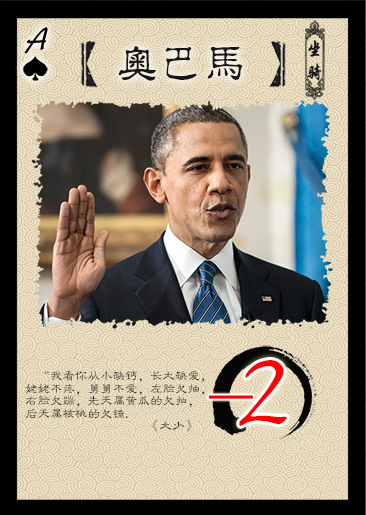
<style>
.page{position:relative;width:366px;height:515px}
.page>*{position:absolute;margin:0}
.t1{font:39.2px "Jxixinkai";letter-spacing:0.22em;color:#000000;font-weight:bold;font-style:italic}
.t2{font:41.7px "¾­µä·±½ÇÁ¥ Regular";letter-spacing:0.05em;color:#161616}
.t3{font:125.1px "Jxixinkai";letter-spacing:-0.1em;color:#fa0303}
.t4{font:12.5px/12.5px "FZLBJW--GB1-0";color:#171717}
</style>
<div class="page">
<p class="t1" style="left:24px;top:27px;width:24px;height:27px">A</p>
<p class="t2" style="left:118px;top:46px;width:125px;height:35px">奥巴马</p>
<p class="t3" style="left:239px;top:360px;width:48px;height:66px">2</p>
<p class="t4" style="left:25px;top:370px;width:180px;height:62px;text-align:right">“我看你从小缺钙，长大缺爱，<br>姥姥不疼，舅舅不爱，左脸欠抽，<br>右脸欠踹，先天属黄瓜的欠拍，<br>后天属核桃的欠锤.                          <br>   《大少》</p>
</div>
